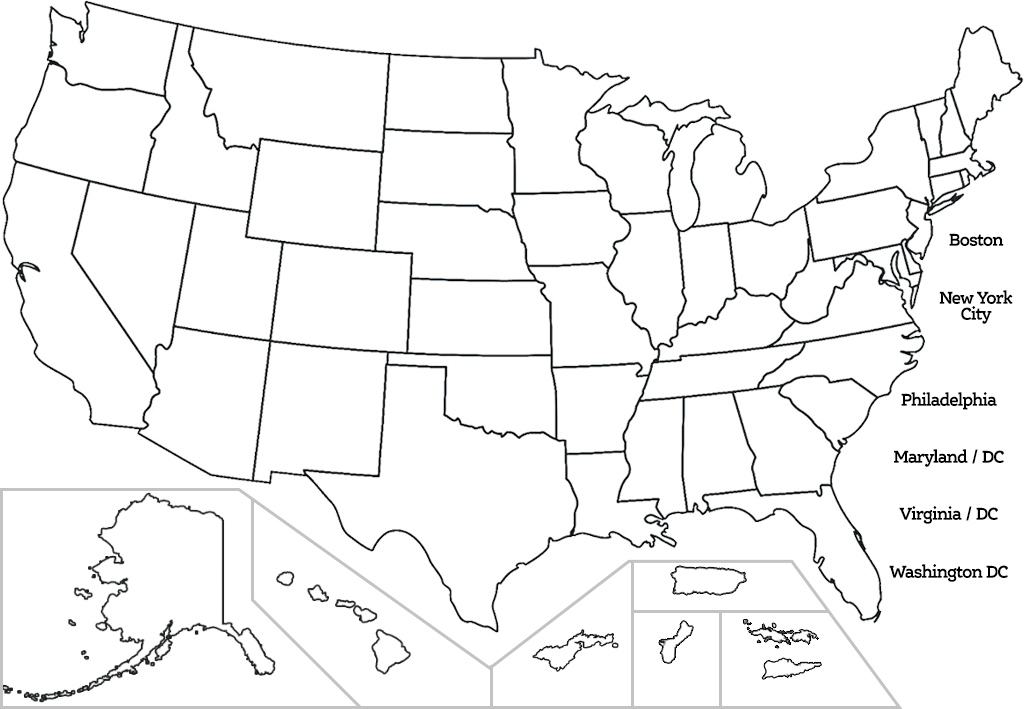
<style>
.page{position:relative;width:1024px;height:709px;background:#ffffff}
.page>*{position:absolute;margin:0}
.t1{font:18px "ErnestinePro-Demibold";letter-spacing:-0.05em;color:#000000;scale:0.9 1}
.t2{font:18px/16px "ErnestinePro-Demibold";letter-spacing:-0.05em;color:#000000;scale:0.9 1}
</style>
<div class="page">
<p class="t1" style="left:949px;top:233px;width:55px;height:13px">Boston</p>
<p class="t2" style="left:939px;top:290px;width:74px;height:34px;text-align:center">New York<br>City</p>
<p class="t1" style="left:901px;top:392px;width:96px;height:18px">Philadelphia</p>
<p class="t1" style="left:894px;top:449px;width:110px;height:18px">Maryland / DC</p>
<p class="t1" style="left:899px;top:506px;width:99px;height:18px">Virginia / DC</p>
<p class="t1" style="left:889px;top:564px;width:119px;height:18px">Washington DC</p>
</div>
